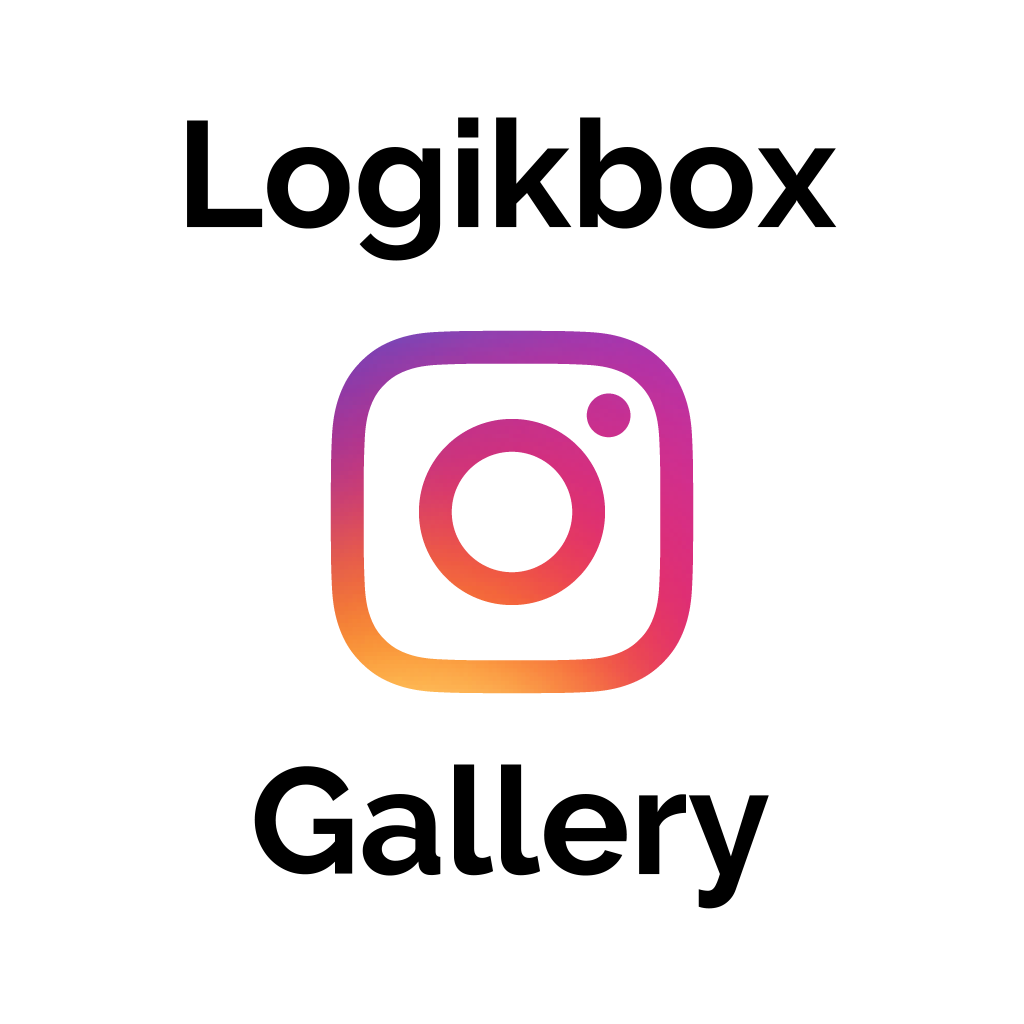
<style>
.page{position:relative;width:1024px;height:1024px;background:#ffffff}
.page>*{position:absolute;margin:0}
.t1{font:150px "Raleway-Bold";color:#000000}
</style>
<div class="page">
<p class="t1" style="left:187px;top:117px;width:650px;height:144px">Logikbox</p>
<p class="t1" style="left:254px;top:764px;width:515px;height:145px">Gallery</p>
</div>
